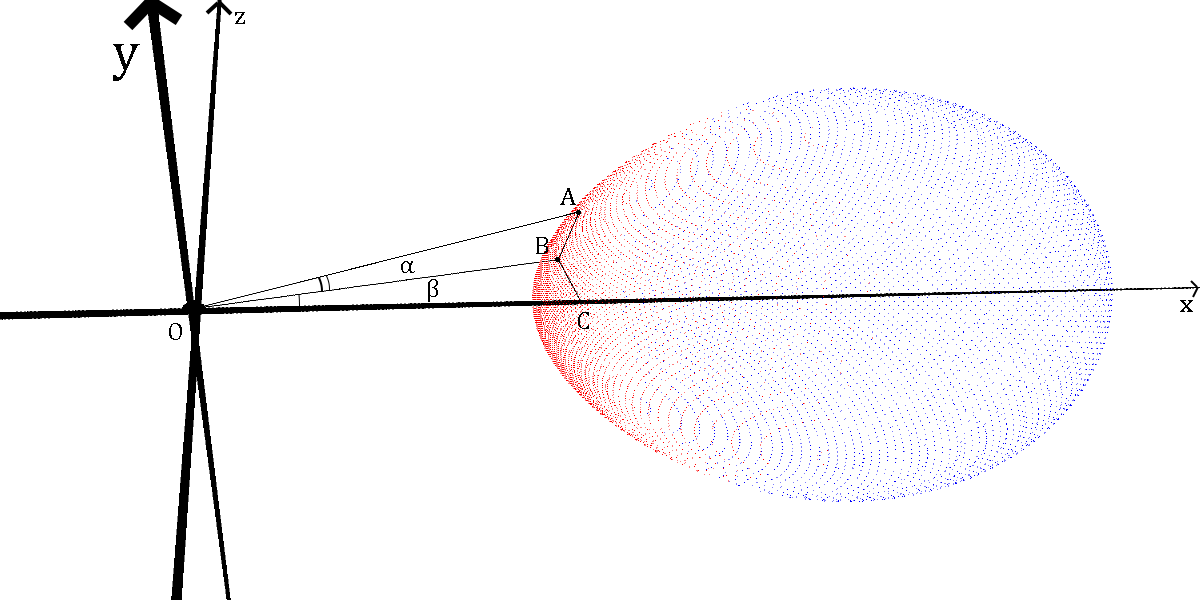
<style>
.page{position:relative;width:1200px;height:600px;background:#ffffff}
.page>*{position:absolute;margin:0}
.t1{font:26px "CambriaMath";color:#000000}
.t2{font:54px "CambriaMath";color:#000000}
</style>
<div class="page">
<p class="t1" style="left:235px;top:12px;width:10px;height:12px">z</p>
<p class="t2" style="left:113px;top:44px;width:27px;height:37px">y</p>
<p class="t1" style="left:560px;top:188px;width:16px;height:17px">A</p>
<p class="t1" style="left:536px;top:237px;width:12px;height:17px">B</p>
<p class="t1" style="left:401px;top:261px;width:14px;height:12px">α</p>
<p class="t1" style="left:428px;top:279px;width:10px;height:23px">β</p>
<p class="t1" style="left:1180px;top:300px;width:13px;height:12px">x</p>
<p class="t1" style="left:578px;top:312px;width:11px;height:17px">C</p>
<p class="t1" style="left:169px;top:323px;width:13px;height:17px">O</p>
</div>
